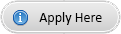
<style>
.page{position:relative;width:121px;height:34px}
.page>*{position:absolute;margin:0}
.t1{font:14px "Calibri";color:#000000}
</style>
<div class="page">
<p class="t1" style="left:39px;top:12px;width:63px;height:13px">Apply Here</p>
</div>
